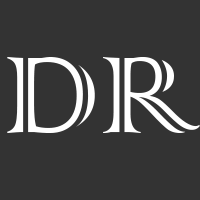
<style>
.page{position:relative;width:200px;height:200px;background:#333333}
.page>*{position:absolute;margin:0}
.t1{font:144.2px "ColonnaMT";color:#ffffff}
</style>
<div class="page">
<p class="t1" style="left:7px;top:57px;width:193px;height:76px">DR</p>
</div>
